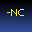
<style>
.page{position:relative;width:32px;height:32px}
.page>*{position:absolute;margin:0}
.t1{font:10px "Tahoma";color:#f1ea40}
</style>
<div class="page">
<p class="t1" style="left:7px;top:9px;width:17px;height:7px">-NC</p>
</div>
